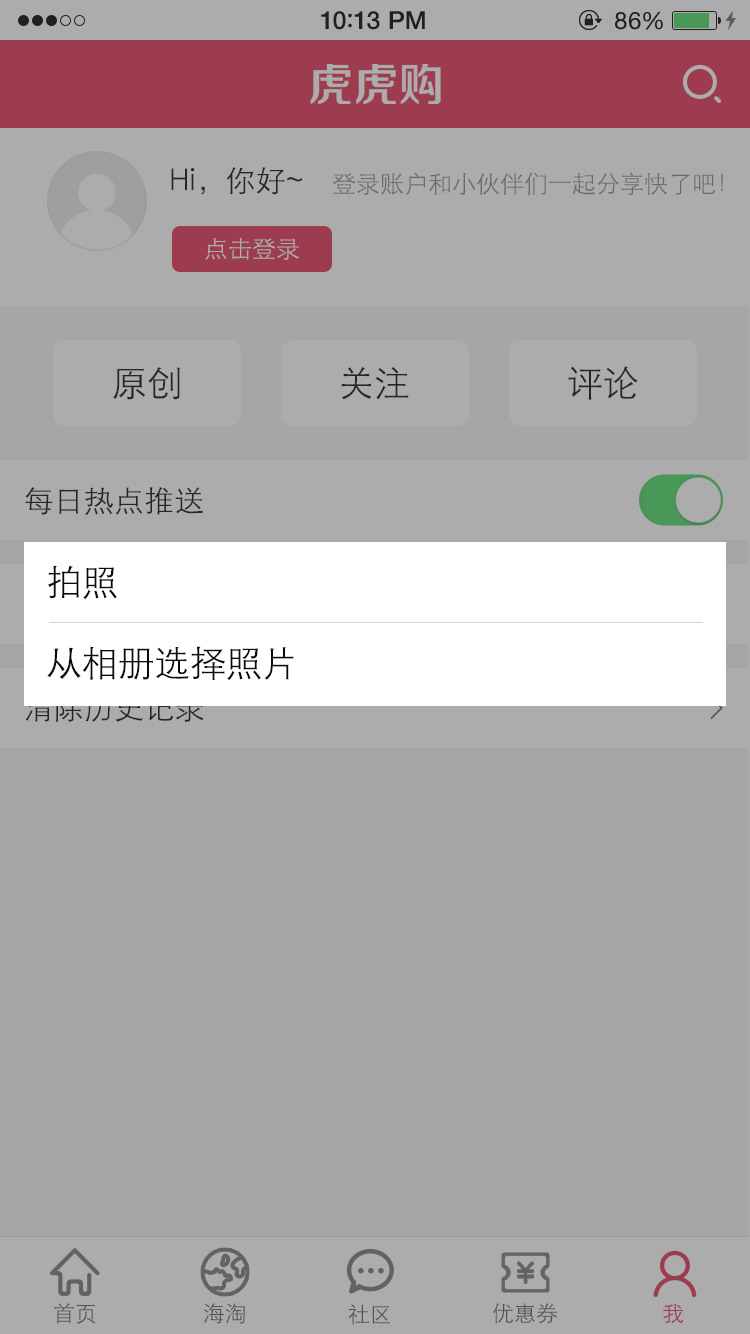
<style>
.page{position:relative;width:750px;height:1334px;background:#a6a6a7}
.page>*{position:absolute;margin:0}
.t1{font:25px "HelveticaNeue-Medium";letter-spacing:0.015em;color:#202021}
.t2{font:25px "ArialRoundedMTBold";letter-spacing:0.015em;color:#202021}
.t3{font:24px "HelveticaNeue";letter-spacing:0.03em;color:#202021}
.t4{font:30px "STXihei";color:#262627}
.t5{font:24px "STXihei";color:#6b6b6c}
.t6{font:24px "STXihei";color:#acacad}
.t7{font:36px "STXihei";color:#262627}
.t8{font:36px "STXihei";color:#0a0a0a}
.t9{font:30px "STXihei"}
.t10{font:21.9px "STXihei";color:#525253}
.t11{font:21.9px "STXihei";color:#9d3c4e}
</style>
<div class="page">
<p class="t1" style="left:321px;top:11px;width:104px;height:19px">10<span class="t2">:</span>13 PM</p>
<p class="t3" style="left:615px;top:11px;width:48px;height:19px">86%</p>
<p class="t4" style="left:171px;top:167px;width:131px;height:28px">Hi，你好~</p>
<p class="t5" style="left:333px;top:172px;width:390px;height:23px">登录账户和小伙伴们一起分享快了吧！</p>
<p class="t6" style="left:205px;top:237px;width:94px;height:23px">点击登录</p>
<p class="t7" style="left:341px;top:366px;width:68px;height:34px">关注</p>
<p class="t7" style="left:568px;top:366px;width:70px;height:34px">评论</p>
<p class="t7" style="left:113px;top:367px;width:68px;height:33px">原创</p>
<p class="t4" style="left:25px;top:487px;width:178px;height:28px">每日热点推送</p>
<p class="t8" style="left:48px;top:565px;width:69px;height:34px">拍照</p>
<p class="t8" style="left:47px;top:646px;width:247px;height:34px">从相册选择照片</p>
<p class="t9" style="left:25px;top:694px;width:179px;height:28px">清除历史记录</p>
<p class="t10" style="left:54px;top:1303px;width:42px;height:21px">首页</p>
<p class="t10" style="left:203px;top:1303px;width:42px;height:21px">海淘</p>
<p class="t10" style="left:348px;top:1304px;width:42px;height:21px">社区</p>
<p class="t10" style="left:492px;top:1303px;width:65px;height:21px">优惠券</p>
<p class="t11" style="left:663px;top:1303px;width:20px;height:20px">我</p>
</div>
